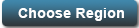
<style>
.page{position:relative;width:139px;height:28px}
.page>*{position:absolute;margin:0}
.t1{font:14px "Arial-BoldMT";letter-spacing:0.025em;color:#ffffff}
</style>
<div class="page">
<p class="t1" style="left:18px;top:8px;width:106px;height:13px">Choose Region</p>
</div>
